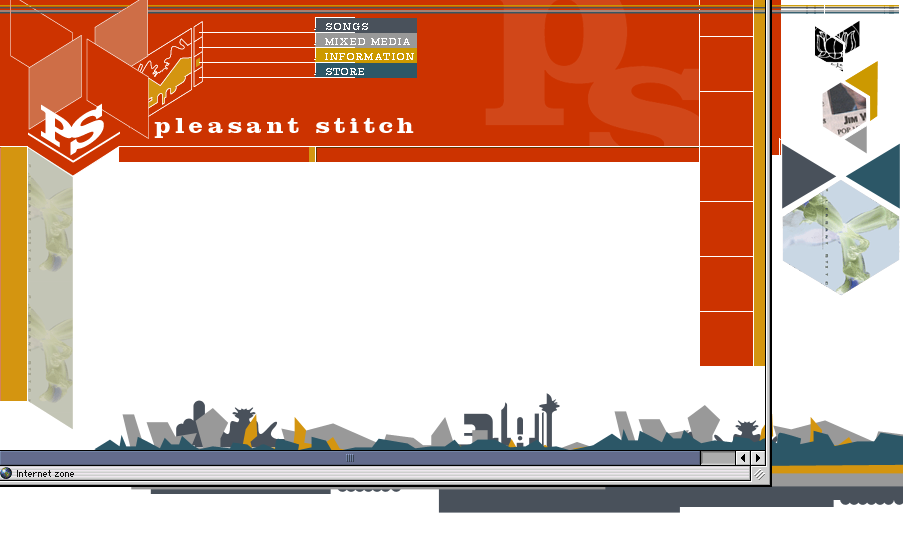
<style>
.page{position:relative;width:903px;height:544px;background:#ffffff}
.page>*{position:absolute;margin:0}
.t1{font:10px "Clarendon";letter-spacing:0.15em;color:#fefefe}
.t2{font:10px "Clarendon";letter-spacing:0.1em;color:#fefefe}
</style>
<div class="page">
<p class="t1" style="left:326px;top:23px;width:42px;height:7px">SONGS</p>
<p class="t2" style="left:325px;top:38px;width:85px;height:7px">MIXED MEDIA</p>
<p class="t2" style="left:325px;top:53px;width:89px;height:7px">INFORMATION</p>
<p class="t2" style="left:326px;top:68px;width:38px;height:7px">STORE</p>
</div>
